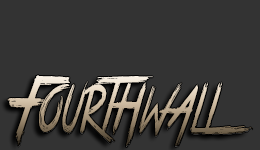
<style>
.page{position:relative;width:260px;height:150px;background:#333333}
.page>*{position:absolute;margin:0}
.t1{font:68.1px "TrueLies";scale:0.66 1}
</style>
<div class="page">
<p class="t1" style="left:7px;top:75px;width:246px;height:71px">Fourthwall</p>
</div>
